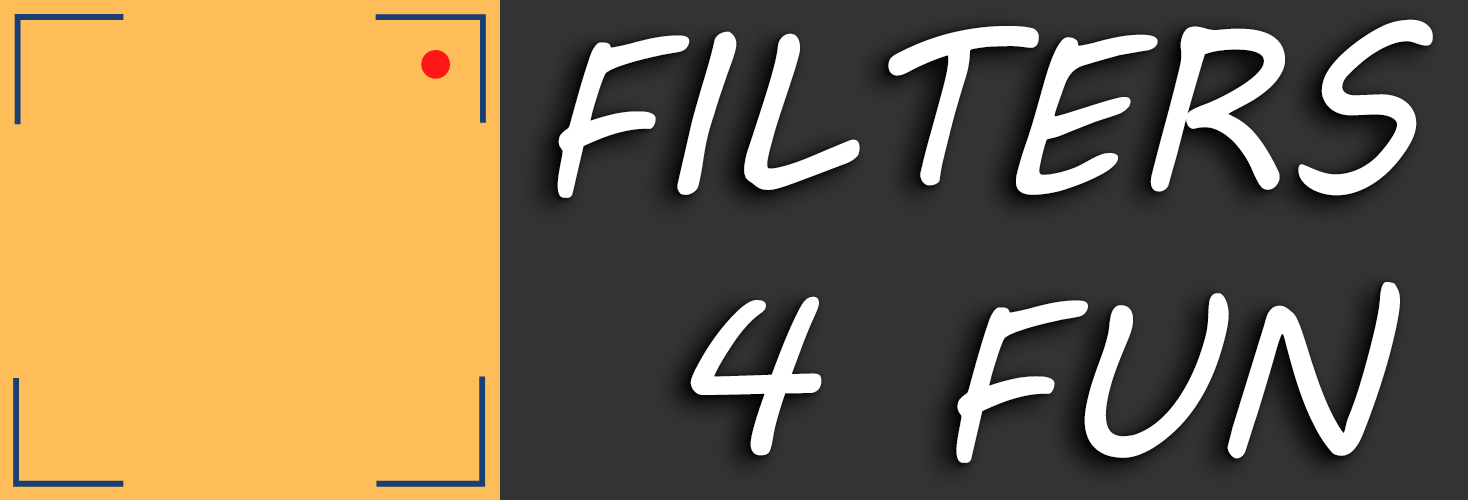
<style>
.page{position:relative;width:1468px;height:500px;background:#ffbd59}
.page>*{position:absolute;margin:0}
.t1{font:220.8px "MVBoli";color:#ffffff}
</style>
<div class="page">
<p class="t1" style="left:557px;top:19px;width:876px;height:444px;text-align:center">FILTERS <br>4 FUN</p>
</div>
